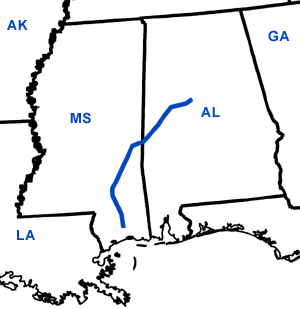
<style>
.page{position:relative;width:300px;height:309px;background:#ffffff}
.page>*{position:absolute;margin:0}
.t1{font:14px "Arial-BoldMT";letter-spacing:0.05em;color:#0047bf}
</style>
<div class="page">
<p class="t1" style="left:7px;top:20px;width:21px;height:10px">AK</p>
<p class="t1" style="left:268px;top:30px;width:22px;height:12px">GA</p>
<p class="t1" style="left:70px;top:112px;width:21px;height:12px">MS</p>
<p class="t1" style="left:201px;top:107px;width:19px;height:10px">AL</p>
<p class="t1" style="left:17px;top:230px;width:18px;height:10px">LA</p>
</div>
